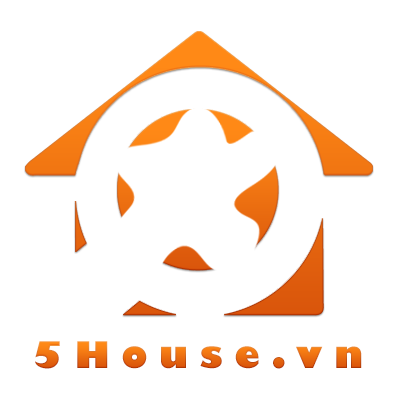
<style>
.page{position:relative;width:400px;height:400px;background:#ffffff}
.page>*{position:absolute;margin:0}
.t1{font:36px "GillSans-UltraBold"}
</style>
<div class="page">
<p class="t1" style="left:35px;top:341px;width:327px;height:28px">5 H o u s e . v n</p>
</div>
